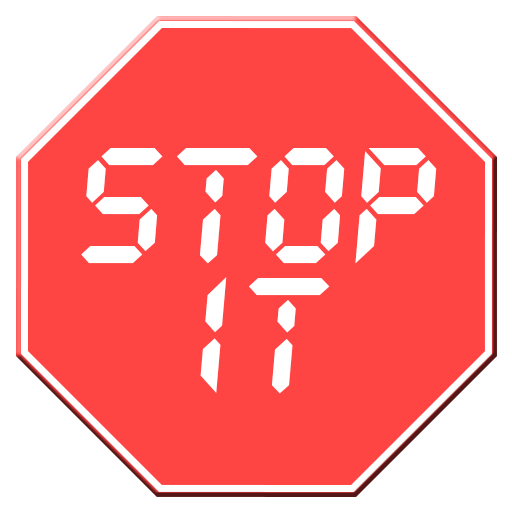
<style>
.page{position:relative;width:512px;height:512px;background:#ff4444}
.page>*{position:absolute;margin:0}
.t1{font:180px/130px "LetsgoDigital-Regular";color:#ffffff}
</style>
<div class="page">
<p class="t1" style="left:81px;top:148px;width:356px;height:246px;text-align:center">Stop<br>It</p>
</div>
